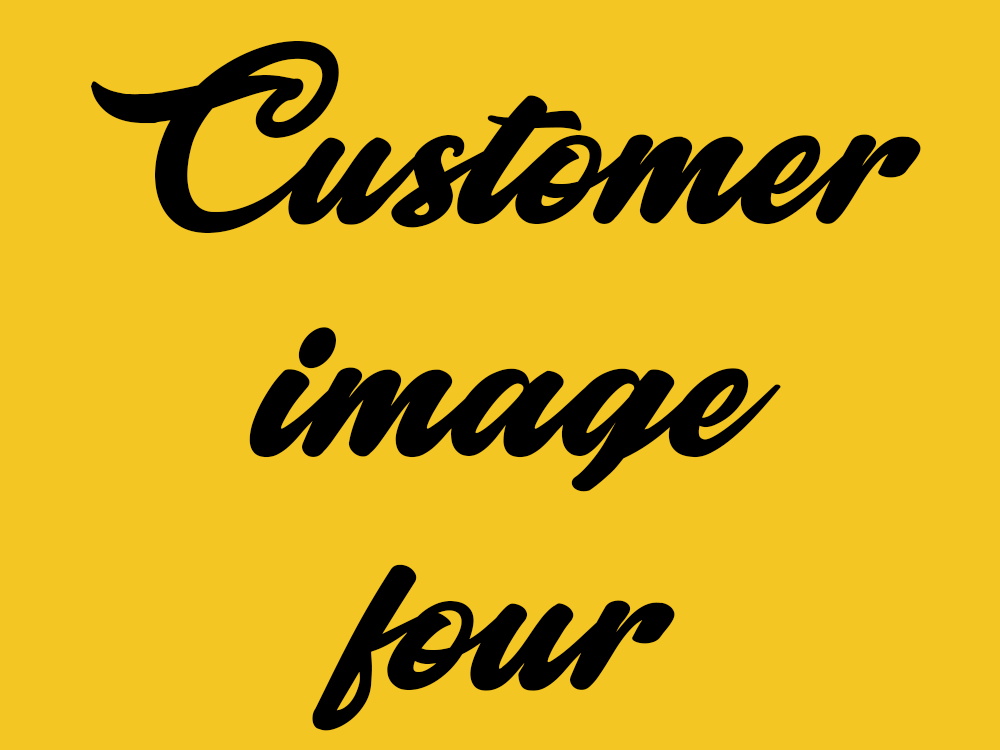
<style>
.page{position:relative;width:1000px;height:750px;background:#f3c623}
.page>*{position:absolute;margin:0}
.t1{font:196.9px/232.8px "Majestic";color:#000000;scale:1.08 1}
</style>
<div class="page">
<p class="t1" style="left:90px;top:41px;width:831px;height:690px;text-align:center">Customer<br>image<br>four</p>
</div>
